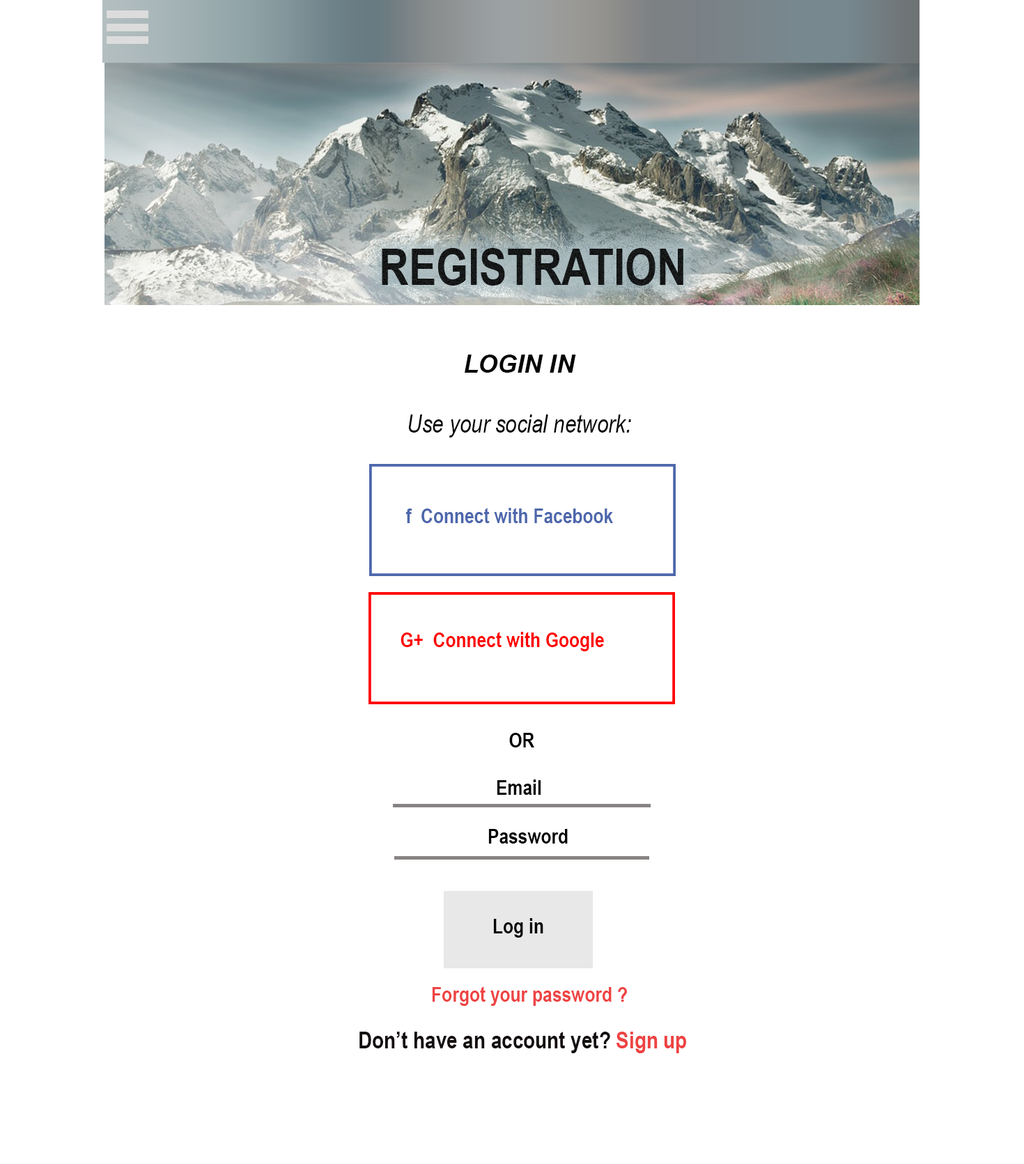
<style>
.page{position:relative;width:1024px;height:1164px;background:#ffffff}
.page>*{position:absolute;margin:0}
.t1{font:50.2px "ArialNarrow-Bold";color:#1c1f20}
.t2{font:25.1px "Arial-BoldItalicMT";color:#060607}
.t3{font:25.1px "ArialNarrow-Italic";color:#060607}
.t4{font:20.9px "ArialNarrow-Bold";color:#4d67ac}
.t5{font:20.9px "ArialNarrow-Bold";color:#ff0000}
.t6{font:20.9px "ArialNarrow-Bold";color:#010101}
.t7{font:20.9px "ArialNarrow-Bold";color:#040202}
.t8{font:20.9px "ArialNarrow-Bold";color:#ee4343}
.t9{font:23.7px "ArialNarrow-Bold";color:#140f0f}
.t10{font:23.7px "ArialNarrow-Bold";color:#ee4343}
</style>
<div class="page">
<p class="t1" style="left:382px;top:248px;width:302px;height:38px">REGISTRATION</p>
<p class="t2" style="left:465px;top:355px;width:111px;height:18px;text-align:center">LOGIN IN<br>:</p>
<p class="t3" style="left:408px;top:415px;width:223px;height:23px">Use your social network:</p>
<p class="t4" style="left:406px;top:508px;width:207px;height:15px">f  Connect with Facebook</p>
<p class="t5" style="left:401px;top:632px;width:203px;height:19px">G+  Connect with Google</p>
<p class="t6" style="left:509px;top:733px;width:25px;height:15px">OR</p>
<p class="t7" style="left:497px;top:780px;width:44px;height:15px">Email</p>
<p class="t7" style="left:488px;top:829px;width:80px;height:15px">Password</p>
<p class="t7" style="left:493px;top:918px;width:50px;height:20px">Log in</p>
<p class="t8" style="left:432px;top:987px;width:195px;height:19px">Forgot your password ?</p>
<p class="t9" style="left:360px;top:1032px;width:326px;height:21px">Don’t have an account yet? <span class="t10">Sign up</span></p>
</div>
